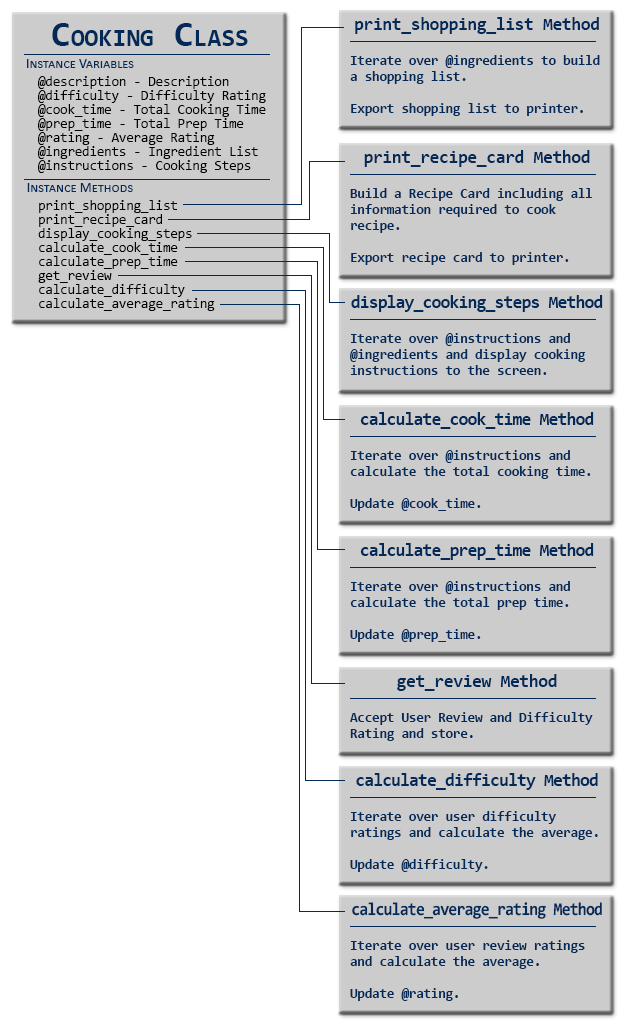
<style>
.page{position:relative;width:626px;height:1026px;background:#ffffff}
.page>*{position:absolute;margin:0}
.t1{font:18px "Consolas-Bold";letter-spacing:-0.025em;color:#022958}
.t2{font:36px "Consolas-Bold";color:#022958;font-variant:small-caps}
.t3{font:14px "Calibri";color:#022958;font-variant:small-caps}
.t4{font:14px/16px "Consolas-Bold";letter-spacing:-0.025em;color:#022958}
.t5{font:14px/14px "Consolas";letter-spacing:-0.025em;color:#000000}
.t6{font:18px "Consolas-Bold";letter-spacing:-0.05em;color:#022958}
.t7{font:18px "Consolas-Bold";letter-spacing:-0.05em;color:#022958;scale:0.9 1}
</style>
<div class="page">
<p class="t1" style="left:355px;top:17px;width:244px;height:17px">print_shopping_list Method</p>
<p class="t2" style="left:52px;top:23px;width:196px;height:23px">Cooking Class</p>
<p class="t3" style="left:27px;top:59px;width:107px;height:9px">Instance Variables</p>
<p class="t4" style="left:350px;top:55px;width:250px;height:61px">Iterate over @ingredients to build a shopping list.<br><br>Export shopping list to printer.</p>
<p class="t5" style="left:38px;top:76px;width:228px;height:97px">@description - Description <br>@difficulty - Difficulty Rating<br>@cook_time - Total Cooking Time<br>@prep_time - Total Prep Time<br>@rating - Average Rating<br>@ingredients - Ingredient List<br>@instructions - Cooking Steps</p>
<p class="t1" style="left:364px;top:150px;width:226px;height:17px">print_recipe_card Method</p>
<p class="t3" style="left:27px;top:183px;width:106px;height:9px">Instance Methods</p>
<p class="t4" style="left:350px;top:188px;width:242px;height:77px">Build a Recipe Card including all information required to cook recipe.<br><br>Export recipe card to printer.</p>
<p class="t5" style="left:38px;top:200px;width:177px;height:111px">print_shopping_list<br>print_recipe_card<br>display_cooking_steps<br>calculate_cook_time<br>calculate_prep_time<br>get_review<br>calculate_difficulty<br>calculate_average_rating</p>
<p class="t6" style="left:351px;top:295px;width:252px;height:17px">display_cooking_steps Method</p>
<p class="t4" style="left:350px;top:333px;width:236px;height:42px">Iterate over @instructions and @ingredients and display cooking instructions to the screen.</p>
<p class="t6" style="left:360px;top:412px;width:234px;height:17px">calculate_cook_time Method</p>
<p class="t4" style="left:350px;top:450px;width:241px;height:61px">Iterate over @instructions and calculate the total cooking time.<br><br>Update @cook_time.</p>
<p class="t6" style="left:360px;top:543px;width:234px;height:17px">calculate_prep_time Method</p>
<p class="t4" style="left:350px;top:581px;width:220px;height:61px">Iterate over @instructions and calculate the total prep time.<br><br>Update @prep_time.</p>
<p class="t1" style="left:397px;top:674px;width:160px;height:17px">get_review Method</p>
<p class="t4" style="left:350px;top:712px;width:243px;height:29px">Accept User Review and Difficulty Rating and store.</p>
<p class="t6" style="left:356px;top:773px;width:242px;height:17px">calculate_difficulty Method</p>
<p class="t4" style="left:350px;top:811px;width:248px;height:61px">Iterate over user difficulty ratings and calculate the average.<br><br>Update @difficulty.</p>
<p class="t7" style="left:352px;top:902px;width:250px;height:17px">calculate_average_rating Method</p>
<p class="t4" style="left:350px;top:940px;width:235px;height:61px">Iterate over user review ratings and calculate the average.<br><br>Update @rating.</p>
</div>
